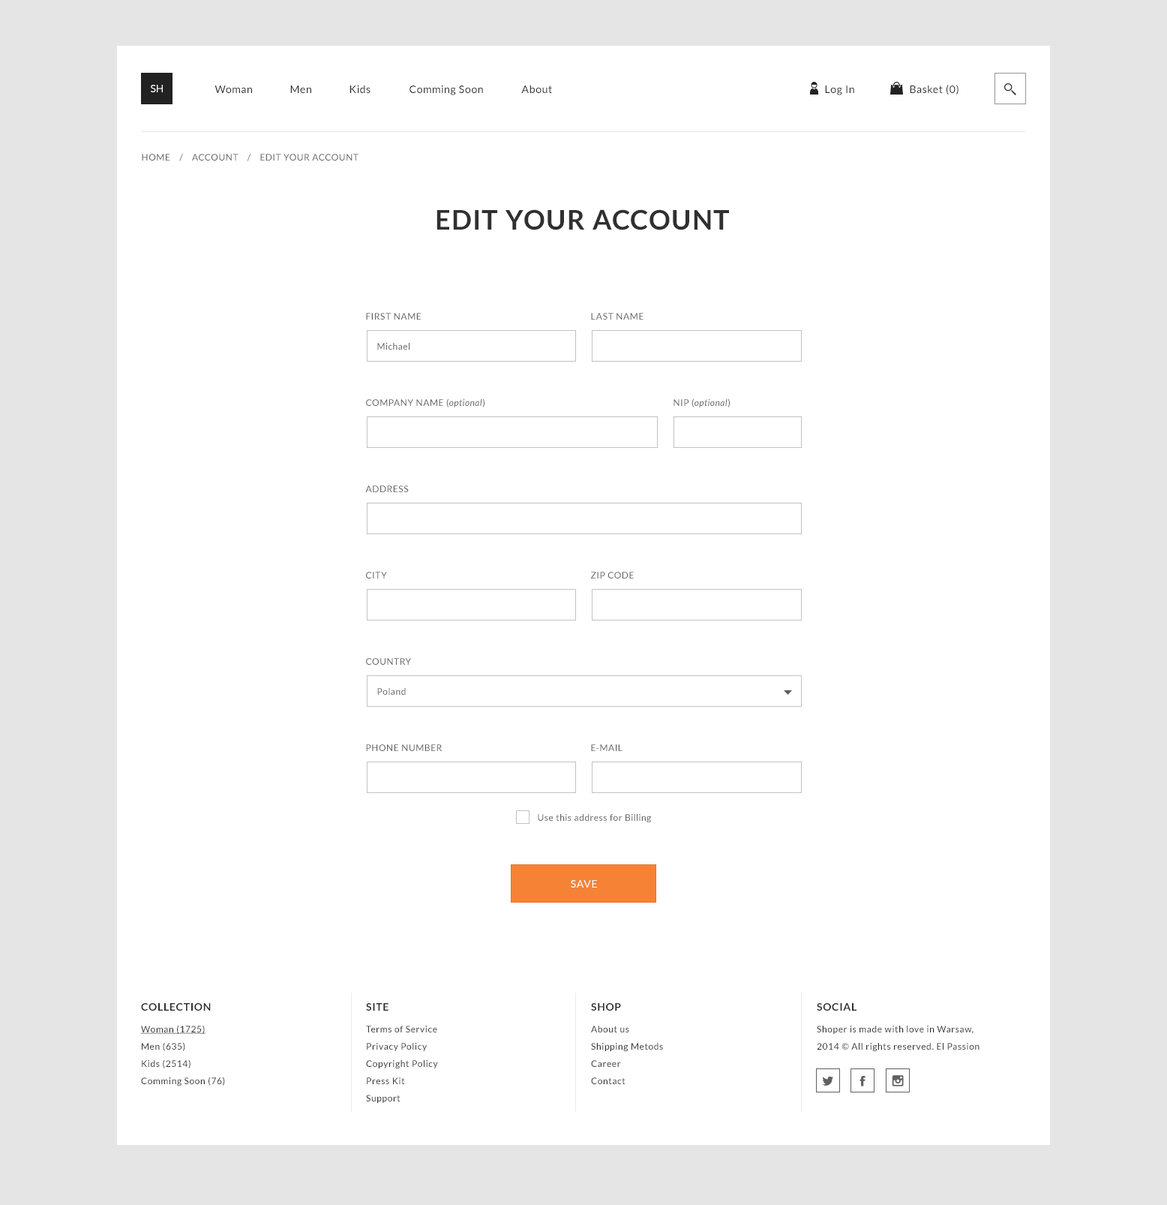
<style>
.page{position:relative;width:1167px;height:1205px;background:#ffffff}
.page>*{position:absolute;margin:0}
.t1{font:10.5px "Lato-Regular";color:#ffffff;text-transform:uppercase}
.t2{font:10.5px "Lato-Regular";letter-spacing:0.05em;color:#303030}
.t3{font:9px "Lato-Regular";letter-spacing:0.05em;color:#606060;text-transform:uppercase}
.t4{font:27px "Lato-Bold";letter-spacing:0.05em;color:#303030;text-transform:uppercase}
.t5{font:9px "Lato-Regular";letter-spacing:0.05em;color:#606060}
.t6{font:9px "Lato-Italic";letter-spacing:0.05em;color:#606060}
.t7{font:10.5px "Lato-Regular";letter-spacing:0.05em;color:#ffffff;text-transform:uppercase}
.t8{font:10.5px "Lato-Bold";letter-spacing:0.05em;color:#303030;text-transform:uppercase}
.t9{font:9px/17.2px "Lato-Regular";letter-spacing:0.05em;color:#303030}
.t10{font:9px/17.2px "Lato-Regular";letter-spacing:0.05em;color:#303030;text-decoration:underline}
</style>
<div class="page">
<p class="t1" style="left:151px;top:85px;width:12px;height:7px">sh</p>
<p class="t2" style="left:215px;top:86px;width:37px;height:7px">Woman</p>
<p class="t2" style="left:290px;top:86px;width:21px;height:7px">Men</p>
<p class="t2" style="left:350px;top:85px;width:21px;height:8px">Kids</p>
<p class="t2" style="left:410px;top:85px;width:73px;height:10px">Comming Soon</p>
<p class="t2" style="left:521px;top:85px;width:31px;height:8px">About</p>
<p class="t2" style="left:825px;top:86px;width:29px;height:9px">Log In</p>
<p class="t2" style="left:910px;top:85px;width:49px;height:10px">Basket (0)</p>
<p class="t3" style="left:142px;top:154px;width:217px;height:7px">HOME    /    account    /    Edit your account</p>
<p class="t4" style="left:437px;top:209px;width:292px;height:21px">edit your account</p>
<p class="t3" style="left:366px;top:313px;width:55px;height:7px">First name</p>
<p class="t3" style="left:591px;top:313px;width:53px;height:7px">last name</p>
<p class="t5" style="left:377px;top:343px;width:33px;height:7px">Michael</p>
<p class="t3" style="left:366px;top:398px;width:119px;height:9px">company name (<span class="t6">optional</span>)</p>
<p class="t6" style="left:674px;top:398px;width:56px;height:9px"><span class="t3">nip (</span>optional<span class="t3">)</span></p>
<p class="t3" style="left:365px;top:485px;width:44px;height:7px">Address</p>
<p class="t3" style="left:366px;top:572px;width:21px;height:6px">city</p>
<p class="t3" style="left:591px;top:572px;width:43px;height:6px">zip code</p>
<p class="t3" style="left:366px;top:658px;width:45px;height:7px">country</p>
<p class="t5" style="left:377px;top:688px;width:29px;height:7px">Poland</p>
<p class="t3" style="left:366px;top:744px;width:76px;height:7px">Phone number</p>
<p class="t3" style="left:591px;top:744px;width:32px;height:7px">e-mail</p>
<p class="t5" style="left:538px;top:814px;width:113px;height:8px">Use this address for Billing</p>
<p class="t7" style="left:571px;top:880px;width:26px;height:7px">save</p>
<p class="t8" style="left:141px;top:1003px;width:70px;height:7px">Collection</p>
<p class="t8" style="left:366px;top:1003px;width:23px;height:7px">site</p>
<p class="t8" style="left:591px;top:1003px;width:30px;height:7px">Shop</p>
<p class="t8" style="left:817px;top:1003px;width:40px;height:7px">social</p>
<p class="t9" style="left:140px;top:1025px;width:85px;height:60px"><span class="t10">Woman (1725)<br></span>Men (635)<br>Kids (2514)<br>Comming Soon (76)</p>
<p class="t9" style="left:366px;top:1025px;width:72px;height:78px">Terms of Service <br>Privacy Policy <br>Copyright Policy <br>Press Kit <br>Support</p>
<p class="t9" style="left:591px;top:1025px;width:72px;height:59px">About us<br>Shipping Metods<br>Career<br>Contact</p>
<p class="t9" style="left:817px;top:1025px;width:163px;height:26px">Shoper is made with love in Warsaw, <br>2014 © All rights reserved. El Passion</p>
</div>
